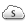
<style>
.page{position:relative;width:26px;height:26px;background:#ffffff}
.page>*{position:absolute;margin:0}
.t1{font:11px "AdobeHeitiStd-Regular";color:#333333}
</style>
<div class="page">
<p class="t1" style="left:11px;top:10px;width:5px;height:7px">s</p>
</div>
